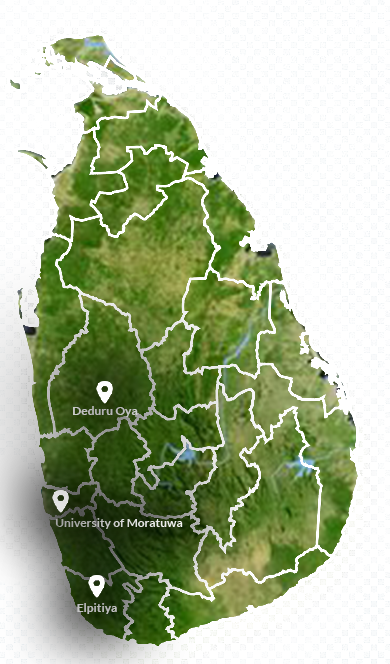
<style>
.page{position:relative;width:390px;height:664px;background:#ffffff}
.page>*{position:absolute;margin:0}
.t1{font:12px "Lato-Bold";color:#bebebe}
.t2{font:12px "Lato-Bold";color:#bdbdbd}
</style>
<div class="page">
<p class="t1" style="left:73px;top:406px;width:65px;height:11px">Deduru Oya</p>
<p class="t2" style="left:77px;top:603px;width:40px;height:11px">Elpitiya</p>
</div>
